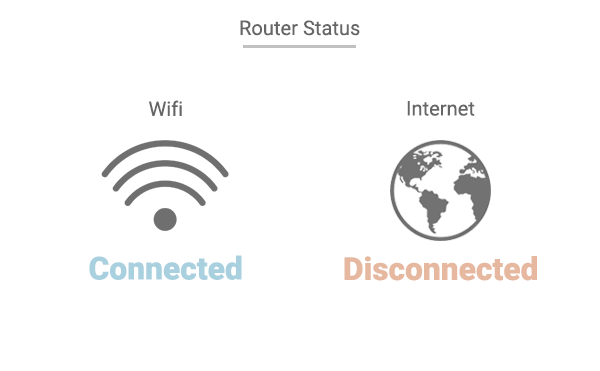
<style>
.page{position:relative;width:600px;height:371px;background:#ffffff}
.page>*{position:absolute;margin:0}
.t1{font:20.1px "Roboto-Regular";color:#666666}
.t2{font:31.8px "Roboto-Black";color:#a9d0de}
.t3{font:31.8px "Roboto-Black";color:#e6b8a0}
</style>
<div class="page">
<p class="t1" style="left:240px;top:20px;width:120px;height:16px">Router Status</p>
<p class="t1" style="left:149px;top:100px;width:33px;height:16px">Wifi</p>
<p class="t1" style="left:407px;top:101px;width:68px;height:15px">Internet</p>
<p class="t2" style="left:89px;top:255px;width:153px;height:25px">Connected</p>
<p class="t3" style="left:344px;top:256px;width:193px;height:25px">Disconnected</p>
</div>
